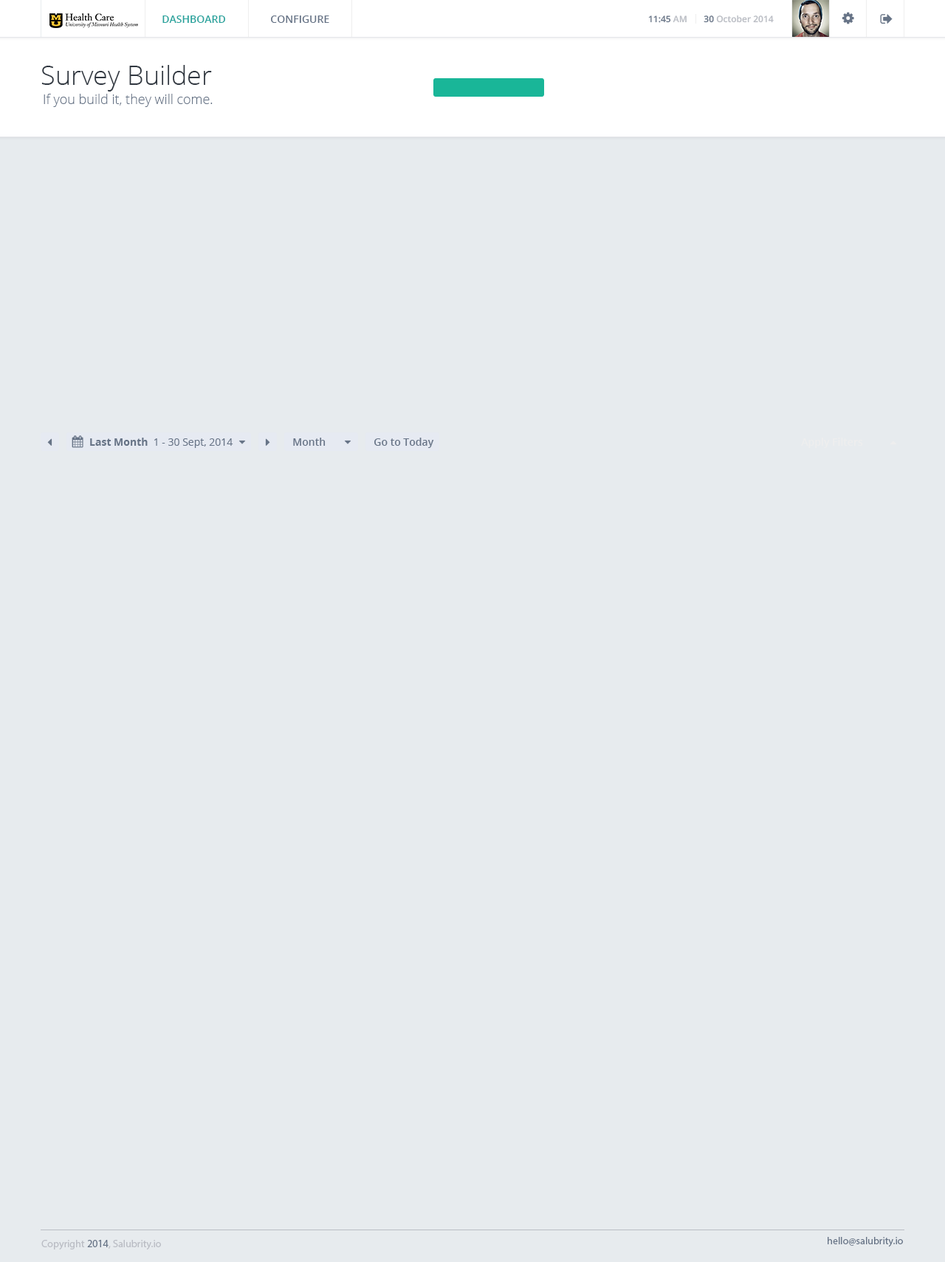
<style>
.page{position:relative;width:945px;height:1262px;background:#e7ebee}
.page>*{position:absolute;margin:0}
.t1{font:10.3px "OpenSans-Semibold";color:#27a49e;text-transform:uppercase}
.t2{font:10.3px "OpenSans-Semibold";color:#677487;text-transform:uppercase}
.t3{font:8.9px "OpenSans-Semibold";color:#677487}
.t4{font:8.9px "OpenSans-Semibold";color:#babdc4}
.t5{font:26.6px "OpenSans-Light";color:#303740}
.t6{font:13.3px "OpenSans-Light";color:#677487}
.t7{font:10.3px "OpenSans";color:#677487}
.t8{font:10.3px "OpenSans-Bold";color:#677487}
.t9{font:10.3px "OpenSans-Semibold";color:#677487}
.t10{font:10.3px "OpenSans-Semibold";color:#eeeeee}
.t11{font:10.3px "MyriadPro-Regular";color:#babdc4}
.t12{font:10.3px "MyriadPro-Regular";color:#677487}
</style>
<div class="page">
<p class="t1" style="left:162px;top:16px;width:63px;height:7px">Dashboard</p>
<p class="t2" style="left:271px;top:16px;width:58px;height:7px">Configure</p>
<p class="t3" style="left:648px;top:16px;width:38px;height:7px">11:45<span class="t4"> AM</span></p>
<p class="t4" style="left:703px;top:15px;width:71px;height:8px"><span class="t3">30</span> October 2014</p>
<p class="t5" style="left:41px;top:65px;width:171px;height:27px">Survey Builder</p>
<p class="t6" style="left:44px;top:94px;width:169px;height:13px">If you build it, they will come.</p>
<p class="t7" style="left:90px;top:438px;width:143px;height:10px"><span class="t8">Last Month</span>  1 - 30 Sept, 2014</p>
<p class="t9" style="left:293px;top:438px;width:33px;height:8px">Month</p>
<p class="t9" style="left:374px;top:438px;width:60px;height:10px">Go to Today</p>
<p class="t10" style="left:801px;top:438px;width:62px;height:10px">Apply Filters</p>
<p class="t11" style="left:41px;top:1240px;width:120px;height:10px">Copyright <span class="t12">2014</span>, Salubrity.io</p>
<p class="t12" style="left:827px;top:1237px;width:76px;height:10px">hello@salubrity.io</p>
</div>
